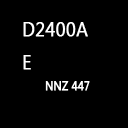
<style>
.page{position:relative;width:128px;height:128px;background:#000000}
.page>*{position:absolute;margin:0}
.t1{font:19.6px/16.7px "SegoeUI";letter-spacing:0.02em;color:#ffffff;font-weight:bold;scale:0.89 1}
.t2{font:11.8px "SegoeUI";letter-spacing:0.02em;color:#ffffff;font-weight:bold;scale:0.89 1}
</style>
<div class="page">
<p class="t1" style="left:23px;top:22px;width:65px;height:48px">D2400A<br><br>E</p>
<p class="t2" style="left:45px;top:81px;width:45px;height:10px">NNZ 447</p>
</div>
